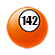
<style>
.page{position:relative;width:55px;height:55px;background:#ffffff}
.page>*{position:absolute;margin:0}
.t1{font:12px "Impact";color:#000000}
</style>
<div class="page">
<p class="t1" style="left:21px;top:16px;width:17px;height:9px">142</p>
</div>
